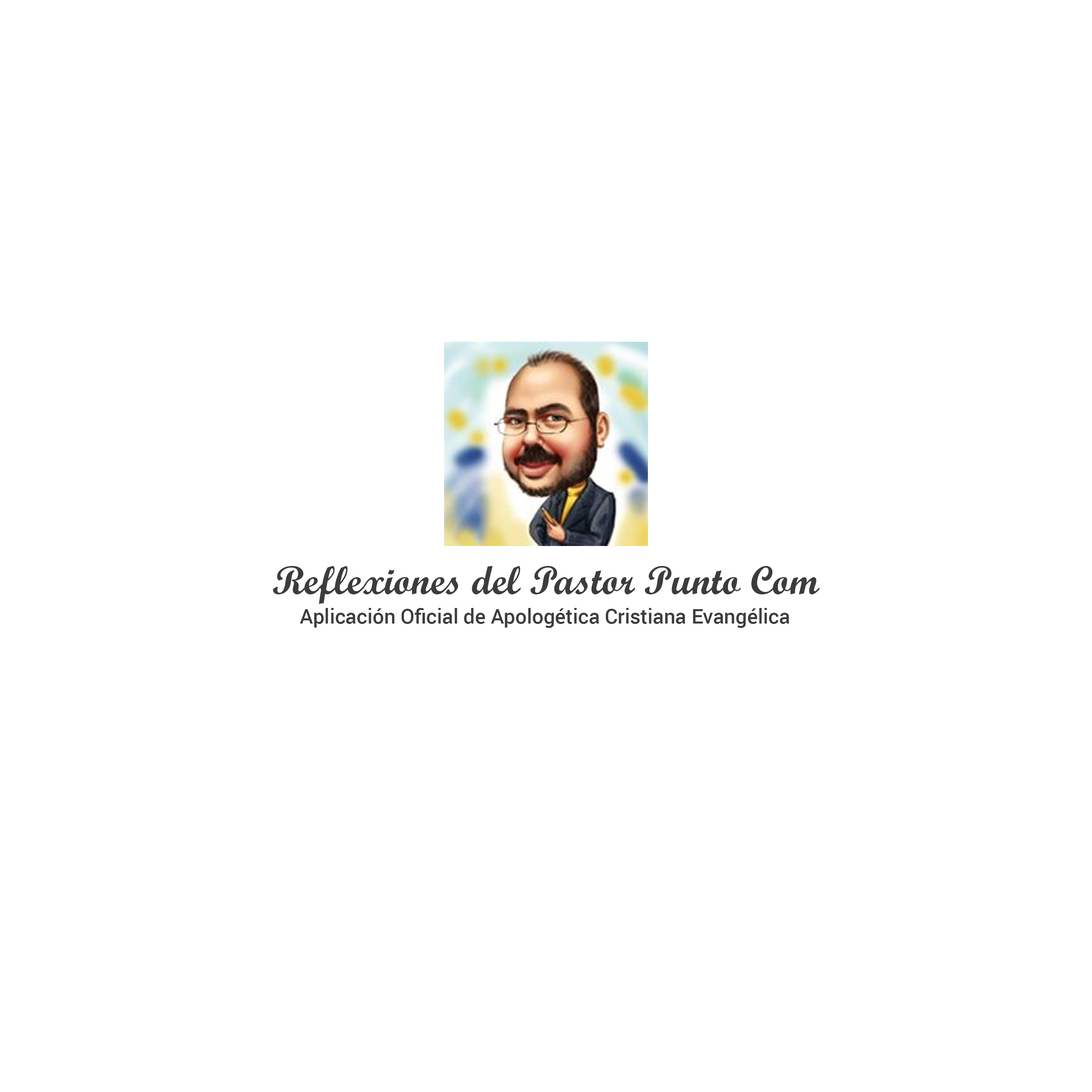
<style>
.page{position:relative;width:1092px;height:1092px;background:#ffffff}
.page>*{position:absolute;margin:0}
.t1{font:40px "ScriptMTBold";color:#3c3c3b}
.t2{font:20.3px "Roboto-Medium";color:#3c3c3b}
</style>
<div class="page">
<p class="t1" style="left:273px;top:566px;width:546px;height:38px">Reflexiones del Pastor Punto Com</p>
<p class="t2" style="left:300px;top:608px;width:489px;height:20px">Aplicación Oficial de Apologética Cristiana Evangélica</p>
</div>
